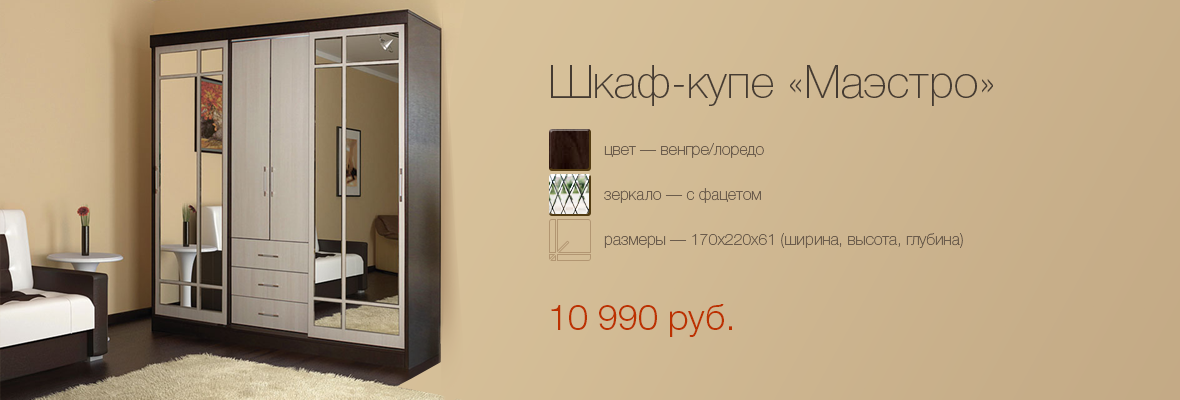
<style>
.page{position:relative;width:1180px;height:400px}
.page>*{position:absolute;margin:0}
.t1{font:45px "Helvetica-3-Thin";color:#453b32}
.t2{font:16px "Helvetica-3-Thin";color:#6b5c4c}
.t3{font:36px "Helvetica-4-Light";color:#bc3100}
</style>
<div class="page">
<p class="t1" style="left:551px;top:65px;width:442px;height:41px">Шкаф-купе «Маэстро»</p>
<p class="t2" style="left:604px;top:143px;width:160px;height:15px">цвет — венгре/лоредо</p>
<p class="t2" style="left:604px;top:188px;width:157px;height:15px">зеркало — с фацетом</p>
<p class="t2" style="left:604px;top:233px;width:359px;height:15px">размеры — 170х220х61 (ширина, высота, глубина)</p>
<p class="t3" style="left:551px;top:304px;width:181px;height:33px">10 990 руб.</p>
</div>
